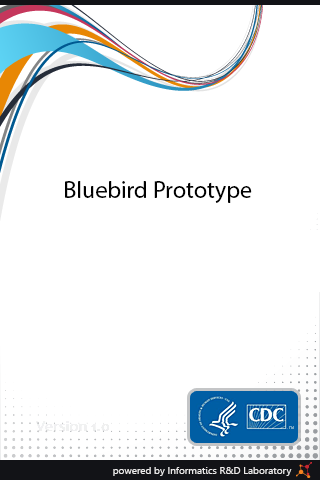
<style>
.page{position:relative;width:320px;height:480px;background:#ffffff}
.page>*{position:absolute;margin:0}
.t1{font:24px "MyriadPro-Regular";color:#010101}
.t2{font:4px "MyriadPro-Regular";color:#72a5c5}
.t3{font:10px "Gisha";color:#ecebeb}
</style>
<div class="page">
<p class="t1" style="left:65px;top:181px;width:187px;height:22px">Bluebird Prototype</p>
<p class="t2" style="left:289px;top:426px;width:5px;height:3px">TM</p>
<p class="t3" style="left:113px;top:467px;width:179px;height:9px">powered by Informatics R&amp;D Laboratory</p>
</div>
